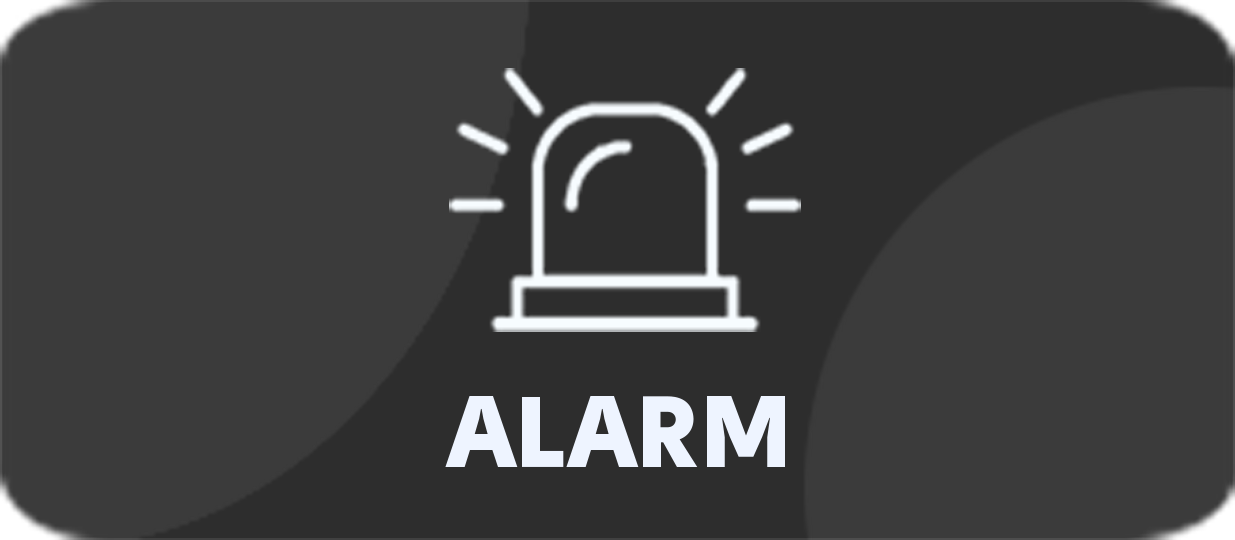
<style>
.page{position:relative;width:1235px;height:540px;background:#3b3b3b}
.page>*{position:absolute;margin:0}
.t1{font:100.7px "Solomon-Sans-Black";color:#eef4ff}
</style>
<div class="page">
<p class="t1" style="left:445px;top:396px;width:340px;height:71px">ALARM</p>
</div>
